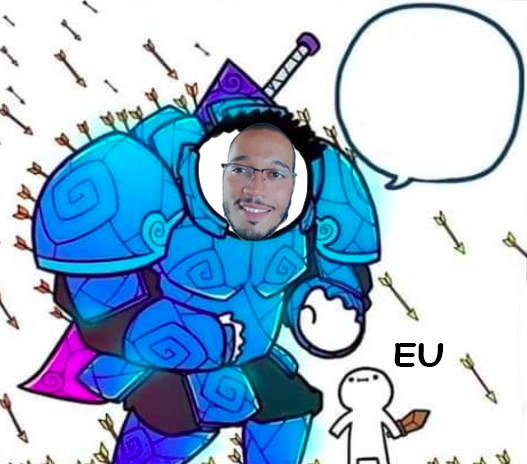
<style>
.page{position:relative;width:527px;height:464px;background:#ffffff}
.page>*{position:absolute;margin:0}
.t1{font:30.3px "ComicSansMS-Bold";color:#000000;scale:1.25 1}
</style>
<div class="page">
<p class="t1" style="left:394px;top:343px;width:50px;height:24px">EU</p>
</div>
